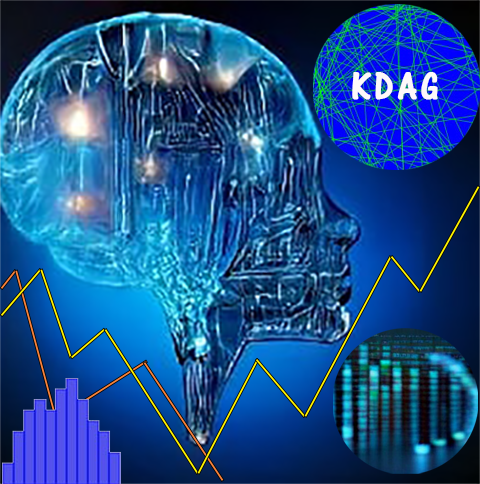
<style>
.page{position:relative;width:480px;height:484px}
.page>*{position:absolute;margin:0}
.t1{font:40px "ARCENA";letter-spacing:0.075em;color:#fdf9f9;font-weight:bold}
</style>
<div class="page">
<p class="t1" style="left:352px;top:72px;width:86px;height:28px">KDAG</p>
</div>
